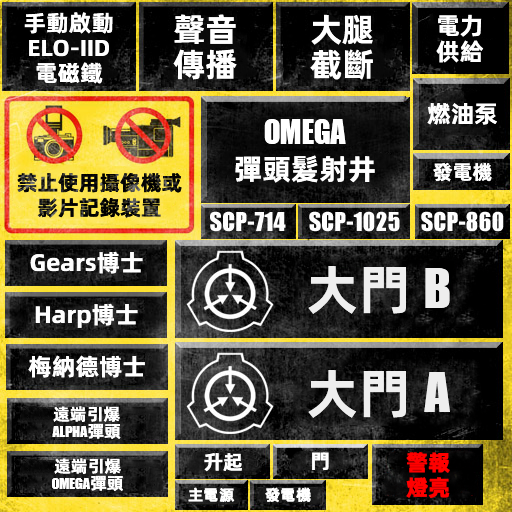
<style>
.page{position:relative;width:512px;height:512px}
.page>*{position:absolute;margin:0}
.t1{font:23px/25px "AlibabaPuHuiTiB";color:#ffffff}
.t2{font:33px/35px "AlibabaPuHuiTiB";color:#ffffff}
.t3{font:24px/26px "AlibabaPuHuiTiB";color:#ffffff}
.t4{font:24px "AlibabaPuHuiTiB";color:#ffffff}
.t5{font:36px/40px "URWImpactW01-Bold";color:#ffffff}
.t6{font:29px/40px "AlibabaPuHuiTiB";color:#ffffff}
.t7{font:21px/25px "AlibabaPuHuiTiB";color:#0d0d0d}
.t8{font:20px "AlibabaPuHuiTiB";color:#ffffff}
.t9{font:53px "AlibabaPuHuiTiB";color:#eeeeee}
.t10{font:60px "URWImpactW01-Bold";color:#eeeeee}
.t11{font:17px/17px "URWImpactW01-Bold";color:#ffffff}
.t12{font:17px/17px "AlibabaPuHuiTiB";color:#ffffff}
.t13{font:22px/25px "AlibabaPuHuiTiB";color:#ff0000;font-weight:bold}
.t14{font:15px "AlibabaPuHuiTiM";color:#ffffff;font-weight:bold}
</style>
<div class="page">
<p class="t1" style="left:24px;top:12px;width:89px;height:72px;text-align:center">手動啟動<br>ELO-IID<br>電磁鐵</p>
<p class="t2" style="left:173px;top:14px;width:64px;height:66px">聲音<br>傳播</p>
<p class="t2" style="left:310px;top:14px;width:63px;height:66px">大腿<br>截斷</p>
<p class="t3" style="left:436px;top:14px;width:48px;height:49px">電力<br>供給</p>
<p class="t4" style="left:427px;top:103px;width:70px;height:22px">燃油泵</p>
<p class="t5" style="left:235px;top:119px;width:140px;height:64px;text-align:center">OMEGA<br><span class="t6">彈頭髮射井</span></p>
<p class="t7" style="left:17px;top:173px;width:165px;height:45px;text-align:center">禁止使用攝像機或<br>影片記錄裝置</p>
<p class="t8" style="left:433px;top:162px;width:59px;height:20px">發電機</p>
<p class="t4" style="left:30px;top:251px;width:113px;height:23px">Gears博士</p>
<p class="t9" style="left:308px;top:266px;width:142px;height:48px">大門        <span class="t10">B</span></p>
<p class="t4" style="left:35px;top:303px;width:103px;height:25px">Harp博士</p>
<p class="t4" style="left:28px;top:355px;width:117px;height:23px">梅納德博士</p>
<p class="t9" style="left:308px;top:370px;width:142px;height:48px">大門        <span class="t10">A</span></p>
<p class="t11" style="left:52px;top:406px;width:69px;height:33px;text-align:center"><span class="t12">遠端引爆<br></span>ALPHA<span class="t12">彈頭</span></p>
<p class="t11" style="left:52px;top:458px;width:71px;height:33px;text-align:center"><span class="t12">遠端引爆<br></span>OMEGA<span class="t12">彈頭</span></p>
<p class="t8" style="left:204px;top:453px;width:38px;height:19px">升起</p>
<p class="t8" style="left:312px;top:452px;width:17px;height:19px">門</p>
<p class="t13" style="left:406px;top:452px;width:44px;height:46px">警報<br>燈亮</p>
<p class="t14" style="left:188px;top:487px;width:47px;height:15px">主電源</p>
<p class="t14" style="left:265px;top:487px;width:46px;height:16px">發電機</p>
</div>
